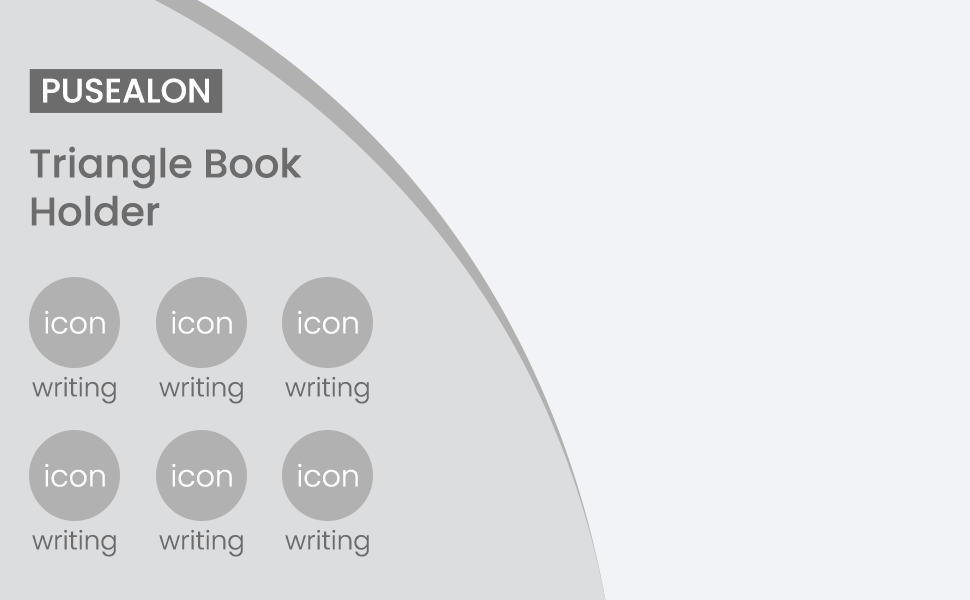
<style>
.page{position:relative;width:970px;height:600px;background:#f2f3f6}
.page>*{position:absolute;margin:0}
.t1{font:33.8px "Poppins-Medium";color:#ffffff}
.t2{font:40px "Poppins-Medium";color:#6c6c6c}
.t3{font:30px "Poppins-Light";color:#ffffff}
.t4{font:26px "Poppins-Light";color:#6c6c6c}
</style>
<div class="page">
<p class="t1" style="left:43px;top:78px;width:166px;height:25px">PUSEALON</p>
<p class="t2" style="left:30px;top:146px;width:272px;height:80px">Triangle Book<br>Holder</p>
<p class="t3" style="left:45px;top:310px;width:60px;height:24px">icon</p>
<p class="t3" style="left:172px;top:310px;width:60px;height:24px">icon</p>
<p class="t3" style="left:298px;top:310px;width:60px;height:24px">icon</p>
<p class="t4" style="left:32px;top:376px;width:84px;height:28px">writing</p>
<p class="t4" style="left:159px;top:376px;width:84px;height:28px">writing</p>
<p class="t4" style="left:285px;top:376px;width:84px;height:28px">writing</p>
<p class="t3" style="left:45px;top:463px;width:60px;height:24px">icon</p>
<p class="t3" style="left:172px;top:463px;width:60px;height:24px">icon</p>
<p class="t3" style="left:298px;top:463px;width:60px;height:24px">icon</p>
<p class="t4" style="left:32px;top:529px;width:84px;height:28px">writing</p>
<p class="t4" style="left:159px;top:529px;width:84px;height:28px">writing</p>
<p class="t4" style="left:285px;top:529px;width:84px;height:28px">writing</p>
</div>
